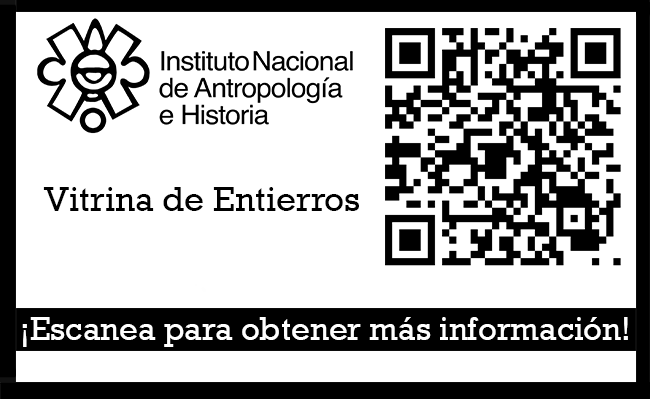
<style>
.page{position:relative;width:650px;height:399px;background:#ffffff}
.page>*{position:absolute;margin:0}
.t1{font:35px "Rockwell";color:#000000}
.t2{font:33px "Rockwell";color:#ffffff}
</style>
<div class="page">
<p class="t1" style="left:43px;top:187px;width:316px;height:24px">Vitrina de Entierros</p>
<p class="t2" style="left:22px;top:317px;width:606px;height:30px">¡Escanea para obtener más información!</p>
</div>
